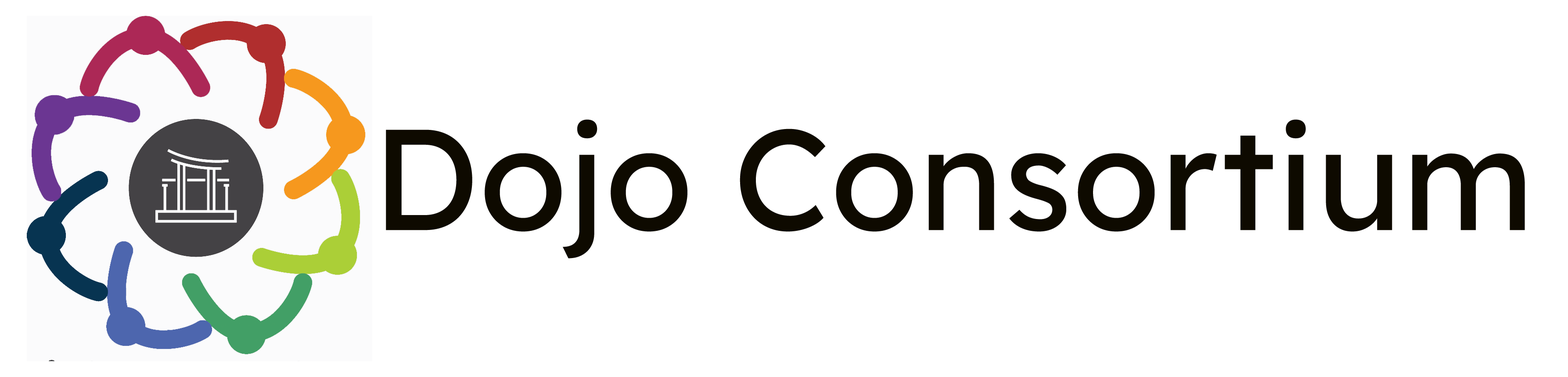
<style>
.page{position:relative;width:1568px;height:377px;background:#ffffff}
.page>*{position:absolute;margin:0}
.t1{font:143.2px "LexendDeca-Regular";color:#0e0a00}
</style>
<div class="page">
<p class="t1" style="left:386px;top:119px;width:1139px;height:140px">Dojo Consortium</p>
</div>
